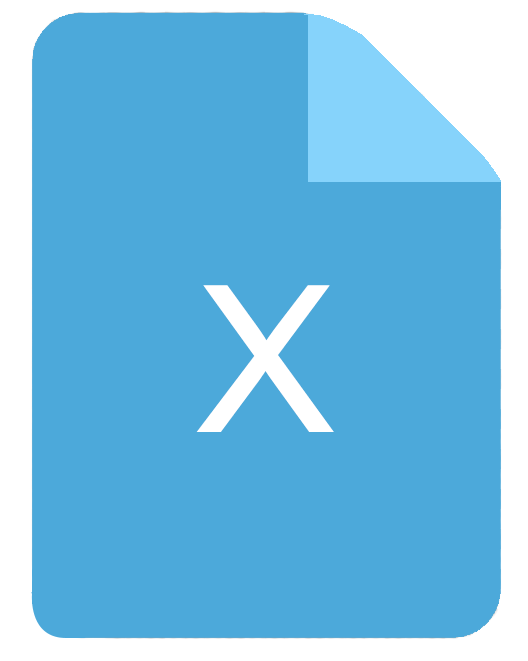
<style>
.page{position:relative;width:528px;height:661px;background:#4ca9da}
.page>*{position:absolute;margin:0}
.t1{font:204.6px "ArialMT";color:#ffffff}
</style>
<div class="page">
<p class="t1" style="left:196px;top:285px;width:138px;height:147px">X</p>
</div>
